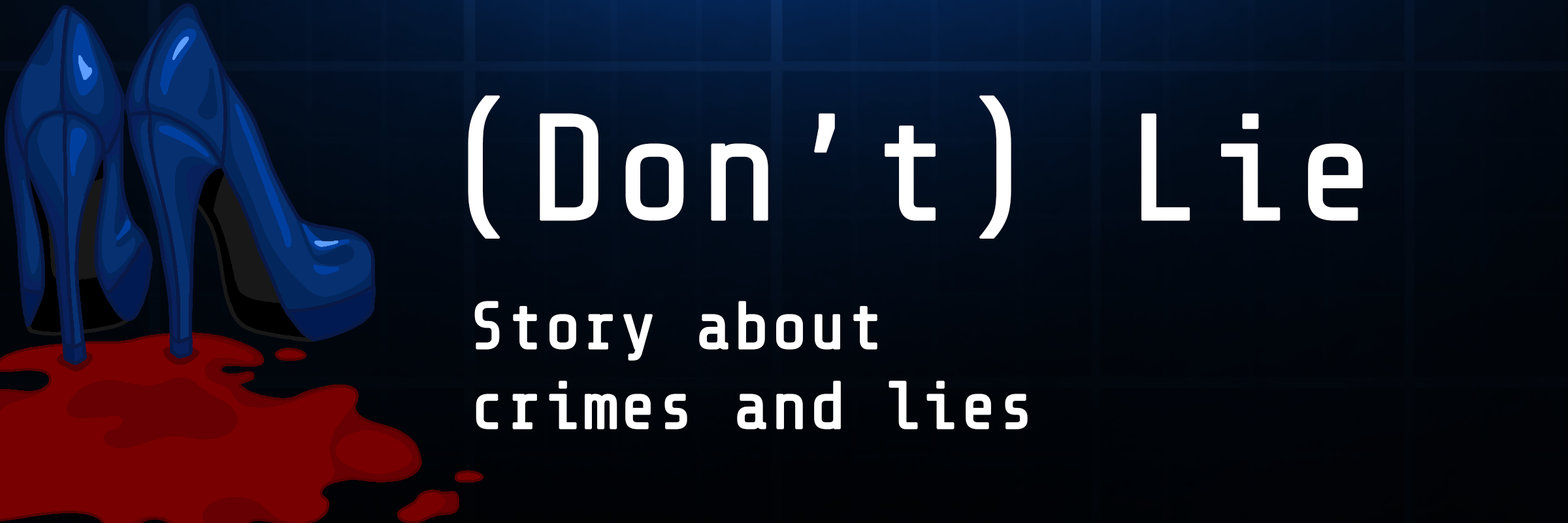
<style>
.page{position:relative;width:1568px;height:523px}
.page>*{position:absolute;margin:0}
.t1{font:150.2px "ShareTechMono-Regular";color:#ffffff;font-weight:bold}
.t2{font:66.7px "ShareTechMono-Regular";color:#ffffff;font-weight:bold}
</style>
<div class="page">
<p class="t1" style="left:468px;top:95px;width:895px;height:143px">(Don’t) Lie</p>
<p class="t2" style="left:474px;top:301px;width:554px;height:128px">Story about <br>crimes and lies</p>
</div>
